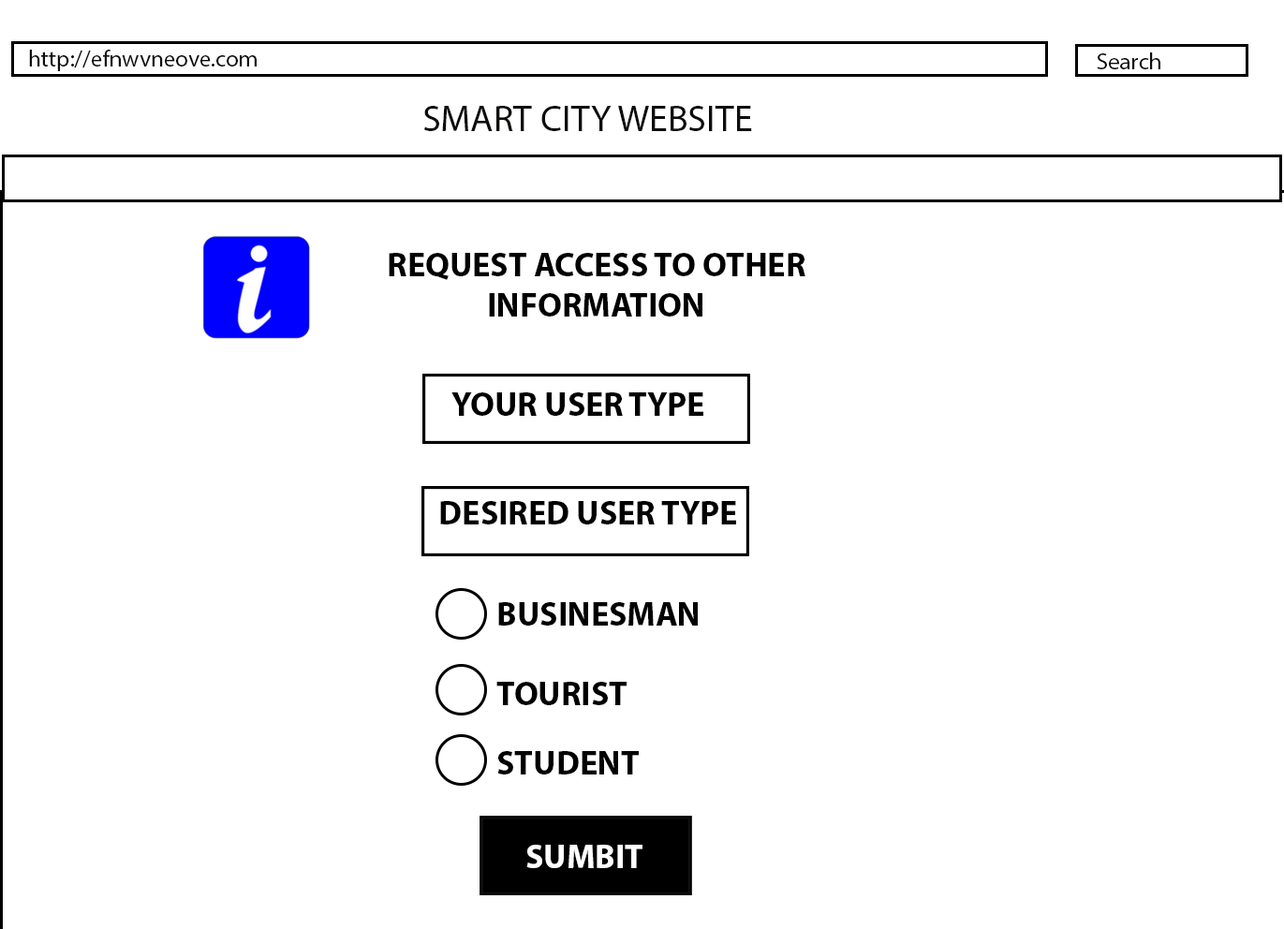
<style>
.page{position:relative;width:1284px;height:929px;background:#ffffff}
.page>*{position:absolute;margin:0}
.t1{font:23.4px "MyriadPro-Regular";color:#0e0d0c}
.t2{font:37.5px "MyriadPro-Regular";color:#0e0d0c}
.t3{font:33.7px "MyriadPro-Bold";color:#000000}
.t4{font:33.7px "MyriadPro-Bold";color:#fdfdfd}
</style>
<div class="page">
<p class="t1" style="left:29px;top:50px;width:228px;height:21px">http://efnwvneove.com</p>
<p class="t1" style="left:1096px;top:52px;width:64px;height:17px">Search</p>
<p class="t2" style="left:424px;top:106px;width:328px;height:25px">SMART CITY WEBSITE</p>
<p class="t3" style="left:389px;top:253px;width:416px;height:63px;text-align:center">REQUEST ACCESS TO OTHER INFORMATION</p>
<p class="t3" style="left:451px;top:392px;width:252px;height:24px">YOUR USER TYPE</p>
<p class="t3" style="left:440px;top:501px;width:296px;height:23px">DESIRED USER TYPE</p>
<p class="t3" style="left:498px;top:602px;width:200px;height:23px">BUSINESMAN</p>
<p class="t3" style="left:496px;top:682px;width:130px;height:23px">TOURIST</p>
<p class="t3" style="left:497px;top:751px;width:142px;height:23px">STUDENT</p>
<p class="t4" style="left:526px;top:845px;width:116px;height:23px">SUMBIT</p>
</div>
